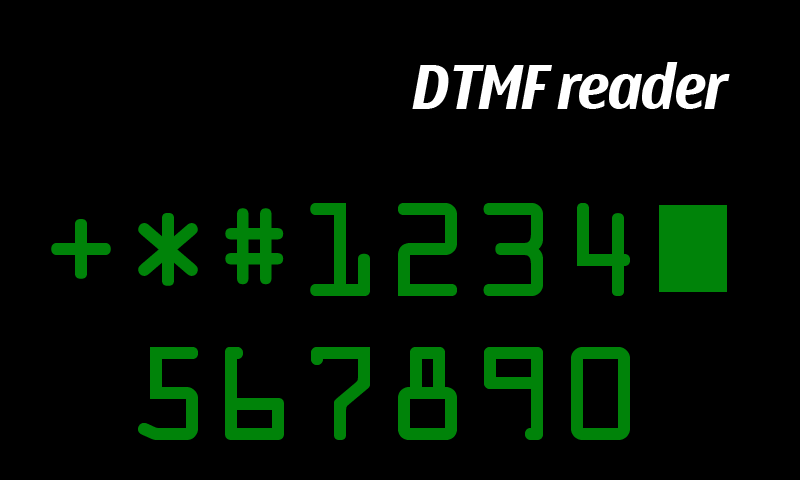
<style>
.page{position:relative;width:800px;height:480px;background:#000000}
.page>*{position:absolute;margin:0}
.t1{font:60px "NokiaLargeMultiscript-BoldItalic";color:#ffffff}
.t2{font:120px "OCRAStd";color:#008309}
</style>
<div class="page">
<p class="t1" style="left:412px;top:62px;width:318px;height:47px">DTMF reader</p>
<p class="t2" style="left:51px;top:203px;width:579px;height:237px;text-align:right">+*#1234<br>567890</p>
</div>
